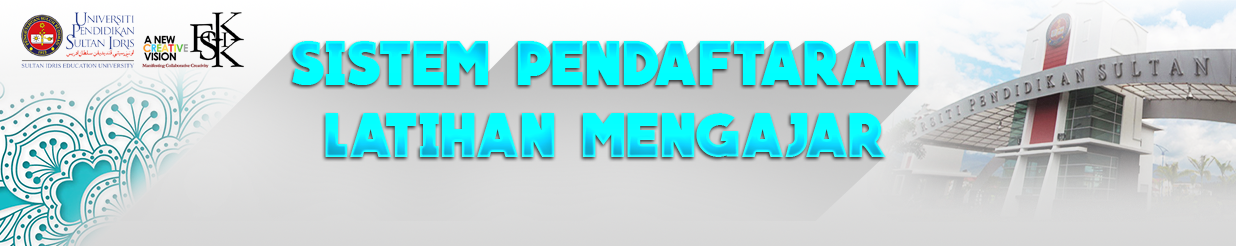
<style>
.page{position:relative;width:1236px;height:246px}
.page>*{position:absolute;margin:0}
.t1{font:60px "QUARTZO-Bold";letter-spacing:0.02em;color:#04ffff;text-transform:uppercase}
</style>
<div class="page">
<p class="t1" style="left:292px;top:41px;width:627px;height:116px;text-align:center">sistem pendaftaran<br>latihan mengajar</p>
</div>
